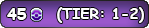
<style>
.page{position:relative;width:149px;height:28px}
.page>*{position:absolute;margin:0}
.t1{font:12px "ComicSansMS-Bold";color:#ffffff}
.t2{font:14.7px "ComicSansMS-Bold";color:#ffffff}
</style>
<div class="page">
<p class="t1" style="left:7px;top:8px;width:20px;height:12px">45</p>
<p class="t2" style="left:57px;top:7px;width:87px;height:16px">(TIER: 1-2)</p>
</div>
